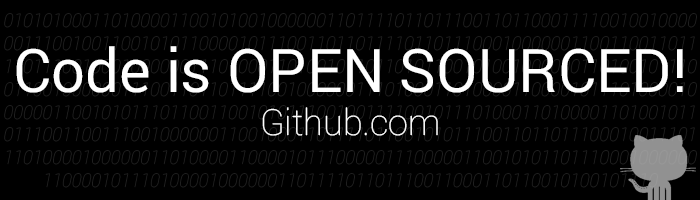
<style>
.page{position:relative;width:700px;height:200px;background:#000000}
.page>*{position:absolute;margin:0}
.t1{font:60px "Roboto-Regular";color:#ffffff}
.t2{font:36px "Roboto-Thin";color:#ffffff}
</style>
<div class="page">
<p class="t1" style="left:16px;top:46px;width:667px;height:90px;text-align:center">Code is OPEN SOURCED!<br><span class="t2">Github.com</span></p>
</div>
